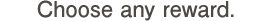
<style>
.page{position:relative;width:271px;height:21px;background:#ffffff}
.page>*{position:absolute;margin:0}
.t1{font:22px "FutoGoB101Pr5-Bold";color:#4c4843}
</style>
<div class="page">
<p class="t1" style="left:37px;top:0px;width:197px;height:21px">Choose any reward.</p>
</div>
